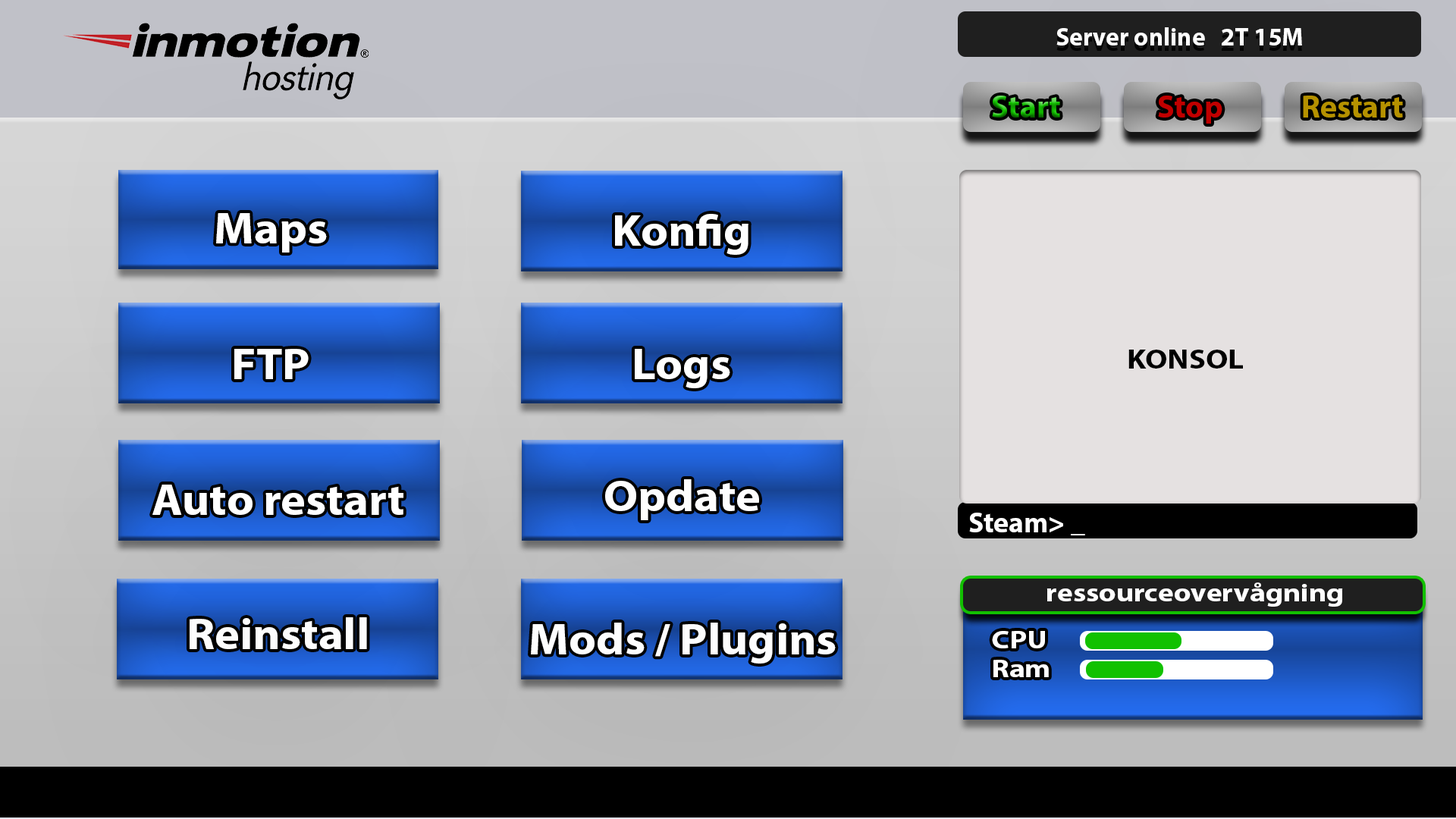
<style>
.page{position:relative;width:1456px;height:819px}
.page>*{position:absolute;margin:0}
.t1{font:25.3px "MyriadPro-Bold";color:#ffffff}
.t2{font:31.6px "MyriadPro-Bold"}
.t3{font:31.6px "MyriadPro-Bold";color:#c00000}
.t4{font:31.6px "MyriadPro-Bold";color:#b59100}
.t5{font:44.2px "MyriadPro-Bold";color:#ffffff;scale:1.07 1}
.t6{font:27.3px "MyriadPro-Bold";color:#000000;scale:1.14 1}
.t7{font:28.4px "MyriadPro-Bold";color:#ffffff}
.t8{font:25.3px "MyriadPro-Bold";color:#ffffff;scale:1.19 1}
</style>
<div class="page">
<p class="t1" style="left:1056px;top:27px;width:246px;height:18px">Server online   2T 15M</p>
<p class="t2" style="left:992px;top:96px;width:68px;height:22px">Start</p>
<p class="t3" style="left:1158px;top:96px;width:64px;height:28px">Stop</p>
<p class="t4" style="left:1303px;top:96px;width:100px;height:22px">Restart</p>
<p class="t5" style="left:216px;top:213px;width:111px;height:40px">Maps</p>
<p class="t5" style="left:615px;top:214px;width:133px;height:41px">Konfig</p>
<p class="t5" style="left:234px;top:349px;width:75px;height:30px">FTP</p>
<p class="t5" style="left:635px;top:349px;width:95px;height:39px">Logs</p>
<p class="t6" style="left:1128px;top:350px;width:115px;height:19px">KONSOL</p>
<p class="t5" style="left:152px;top:485px;width:251px;height:30px">Auto restart</p>
<p class="t5" style="left:605px;top:479px;width:154px;height:41px">Opdate</p>
<p class="t7" style="left:969px;top:513px;width:116px;height:22px">Steam&gt; _</p>
<p class="t8" style="left:1046px;top:582px;width:297px;height:25px">ressourceovervågning</p>
<p class="t5" style="left:190px;top:617px;width:177px;height:32px">Reinstall</p>
<p class="t5" style="left:531px;top:623px;width:305px;height:41px">Mods / Plugins</p>
<p class="t8" style="left:992px;top:631px;width:53px;height:17px">CPU</p>
<p class="t8" style="left:993px;top:660px;width:56px;height:17px">Ram</p>
</div>
